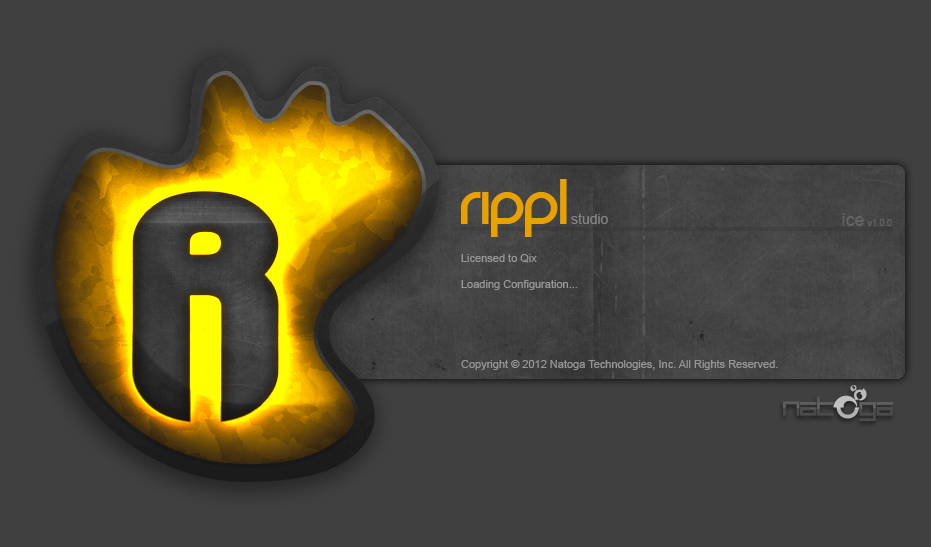
<style>
.page{position:relative;width:931px;height:547px;background:#404040}
.page>*{position:absolute;margin:0}
.t1{font:72px "REZ";color:#e7a200}
.t2{font:14px "ArialMT";color:#838383}
.t3{font:9px "ArialMT";color:#636363}
.t4{font:18px "ArialMT";color:#636363}
.t5{font:11px "ArialMT";color:#979696}
</style>
<div class="page">
<p class="t1" style="left:461px;top:179px;width:106px;height:58px">Rippl</p>
<p class="t2" style="left:571px;top:213px;width:37px;height:11px">studio</p>
<p class="t3" style="left:842px;top:213px;width:50px;height:13px"><span class="t4">ice </span>v1.0.0</p>
<p class="t5" style="left:461px;top:254px;width:317px;height:116px">Licensed to Qix<br><br>Loading Configuration...<br><br><br><br><br><br>Copyright © 2012 Natoga Technologies, Inc. All Rights Reserved.</p>
</div>
